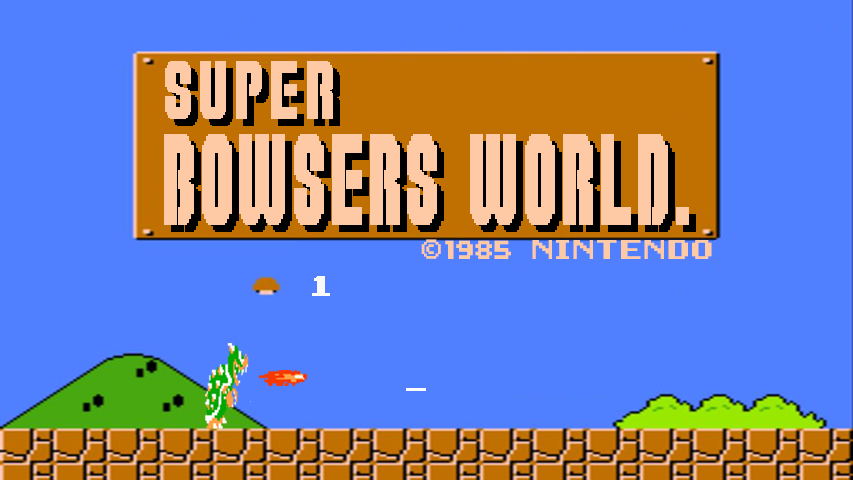
<style>
.page{position:relative;width:853px;height:480px;background:#5080ff}
.page>*{position:absolute;margin:0}
.t1{font:57.6px "SuperPlumberBrothers";letter-spacing:0.075em;color:#fecaa6;scale:1.3 1}
.t2{font:91.2px "SuperPlumberBrothers";letter-spacing:0.05em;color:#fecaa6;scale:0.92 1}
.t3{font:21.7px "Super-Mario-World";color:#fecaa6;scale:1.2 1}
.t4{font:93.3px "SuperPlumberBrothers";color:#fecaa6}
.t5{font:29.3px "Super-Mario-World";letter-spacing:-0.04em;color:#fecaa6;scale:0.75 1}
</style>
<div class="page">
<p class="t1" style="left:165px;top:61px;width:168px;height:58px">SUPER</p>
<p class="t2" style="left:164px;top:134px;width:525px;height:91px">BOWSERS WORLD.</p>
<p class="t3" style="left:421px;top:239px;width:291px;height:20px"><span class="t4">©</span><span class="t5">1985   </span>NINTENDO</p>
</div>
